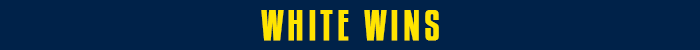
<style>
.page{position:relative;width:700px;height:50px;background:#002249}
.page>*{position:absolute;margin:0}
.t1{font:37.5px "KenyanCoffeeRg-Regular";letter-spacing:0.1em;color:#ffe400;font-weight:bold}
</style>
<div class="page">
<p class="t1" style="left:261px;top:10px;width:178px;height:31px">WHITE WINS</p>
</div>
